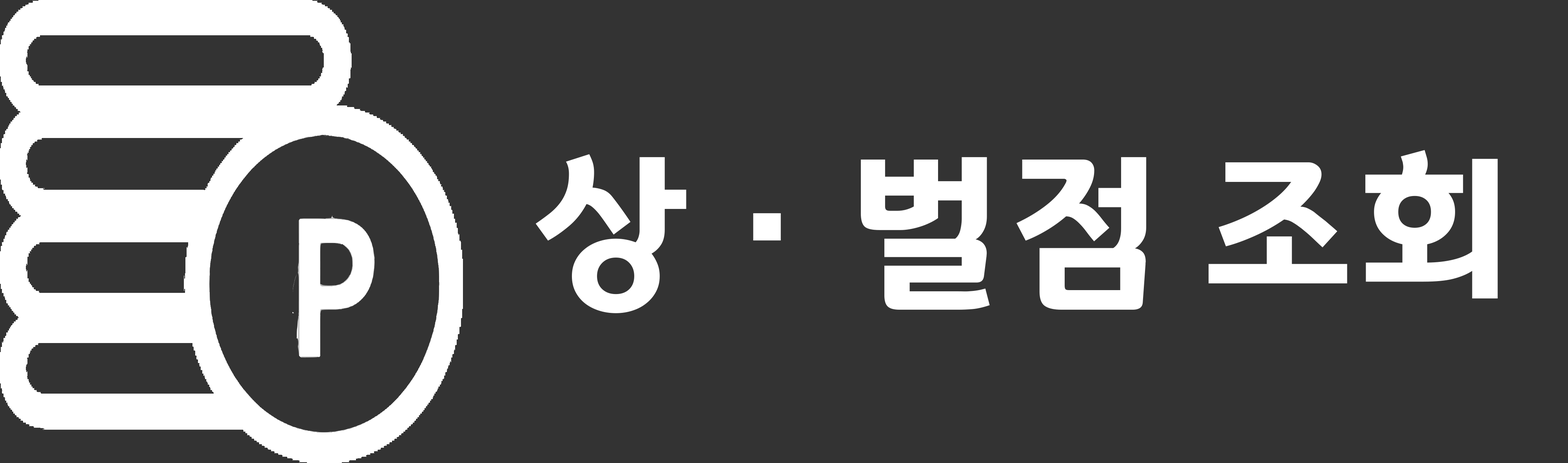
<style>
.page{position:relative;width:1568px;height:463px;background:#333333}
.page>*{position:absolute;margin:0}
.t1{font:173.1px "GyeonggiTitleV";letter-spacing:-0.08em;color:#ffffff}
</style>
<div class="page">
<p class="t1" style="left:535px;top:150px;width:963px;height:163px">상ㆍ벌점 조회</p>
</div>
